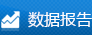
<style>
.page{position:relative;width:92px;height:35px}
.page>*{position:absolute;margin:0}
.t1{font:16px "MicrosoftYaHei";color:#ffffff}
</style>
<div class="page">
<p class="t1" style="left:28px;top:11px;width:64px;height:17px">数据报告</p>
</div>
